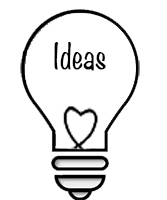
<style>
.page{position:relative;width:167px;height:200px;background:#ffffff}
.page>*{position:absolute;margin:0}
.t1{font:30px "Noteworthy-Light";letter-spacing:0.018em;color:#000000;font-weight:bold;scale:0.8 1}
</style>
<div class="page">
<p class="t1" style="left:54px;top:42px;width:52px;height:29px">Ideas</p>
</div>
